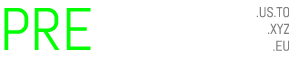
<style>
.page{position:relative;width:289px;height:57px;background:#ffffff}
.page>*{position:absolute;margin:0}
.t1{font:60px "Abel-Regular";color:#ffffff}
.t2{font:60px "Abel-Regular";color:#00ff00}
.t3{font:14px "Abel-Regular";color:#808080}
</style>
<div class="page">
<p class="t1" style="left:4px;top:7px;width:244px;height:44px"><span class="t2">PRE</span>SCENE</p>
<p class="t3" style="left:256px;top:7px;width:34px;height:44px;text-align:right">.US.TO<br>.XYZ<br>.EU</p>
</div>
